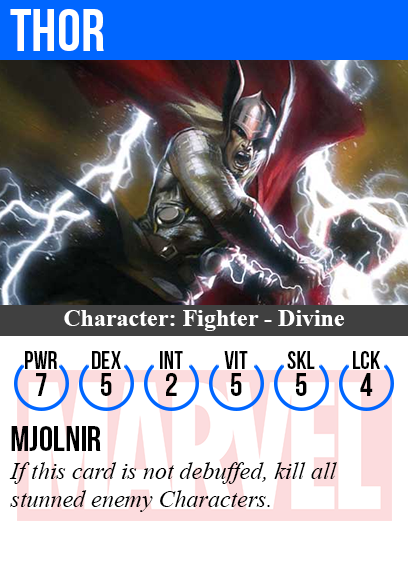
<style>
.page{position:relative;width:408px;height:585px;background:#ffffff}
.page>*{position:absolute;margin:0}
.t1{font:60px "BebasNeue";color:#ffffff}
.t2{font:24px "TimesNewRomanPS-BoldMT";color:#ffffff}
.t3{font:25px "BebasNeue";color:#000000}
.t4{font:32px "BebasNeue";color:#000000}
.t5{font:36px "BebasNeue";color:#000000}
.t6{font:24px "TimesNewRomanPS-ItalicMT";color:#000000}
</style>
<div class="page">
<p class="t1" style="left:10px;top:9px;width:94px;height:42px">thor</p>
<p class="t2" style="left:64px;top:310px;width:280px;height:21px">Character: Fighter - Divine</p>
<p class="t3" style="left:25px;top:351px;width:32px;height:18px">PWR</p>
<p class="t3" style="left:92px;top:351px;width:29px;height:18px">dex</p>
<p class="t3" style="left:160px;top:351px;width:23px;height:18px">int</p>
<p class="t3" style="left:224px;top:351px;width:24px;height:18px">vit</p>
<p class="t3" style="left:287px;top:351px;width:28px;height:18px">skl</p>
<p class="t3" style="left:353px;top:351px;width:27px;height:18px">lck</p>
<p class="t4" style="left:36px;top:373px;width:11px;height:23px">7</p>
<p class="t4" style="left:101px;top:373px;width:11px;height:23px">5</p>
<p class="t4" style="left:166px;top:373px;width:11px;height:23px">2</p>
<p class="t4" style="left:231px;top:373px;width:11px;height:23px">5</p>
<p class="t4" style="left:296px;top:373px;width:11px;height:23px">5</p>
<p class="t4" style="left:360px;top:373px;width:13px;height:23px">4</p>
<p class="t5" style="left:11px;top:426px;width:90px;height:25px">mjolnir</p>
<p class="t6" style="left:9px;top:462px;width:328px;height:50px">If this card is not debuffed, kill all<br>stunned enemy Characters.</p>
</div>
